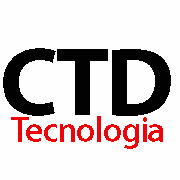
<style>
.page{position:relative;width:180px;height:180px;background:#fffefe}
.page>*{position:absolute;margin:0}
.t1{font:98px "MyriadPro-Bold";letter-spacing:-0.04em;color:#020202}
.t2{font:36px "MyriadPro-Semibold";letter-spacing:-0.04em;color:#f00308}
</style>
<div class="page">
<p class="t1" style="left:3px;top:48px;width:168px;height:68px">CTD</p>
<p class="t2" style="left:11px;top:116px;width:152px;height:33px">Tecnologia</p>
</div>
